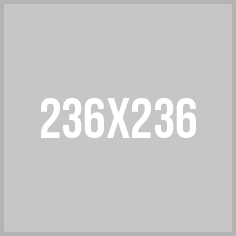
<style>
.page{position:relative;width:236px;height:236px;background:#c6c6c6}
.page>*{position:absolute;margin:0}
.t1{font:56.6px "BebasNeue";color:#ffffff}
</style>
<div class="page">
<p class="t1" style="left:41px;top:98px;width:155px;height:40px">236x236</p>
</div>
